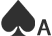
<style>
.page{position:relative;width:52px;height:36px;background:#ffffff}
.page>*{position:absolute;margin:0}
.t1{font:23.4px "MyriadPro-Regular";letter-spacing:-0.1em;color:#303030;font-weight:bold}
</style>
<div class="page">
<p class="t1" style="left:37px;top:19px;width:14px;height:17px">A</p>
</div>
